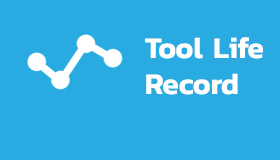
<style>
.page{position:relative;width:280px;height:160px;background:#29abe2}
.page>*{position:absolute;margin:0}
.t1{font:30px "Kanit-SemiBold";color:#ffffff}
</style>
<div class="page">
<p class="t1" style="left:145px;top:37px;width:118px;height:58px">Tool Life<br>Record</p>
</div>
